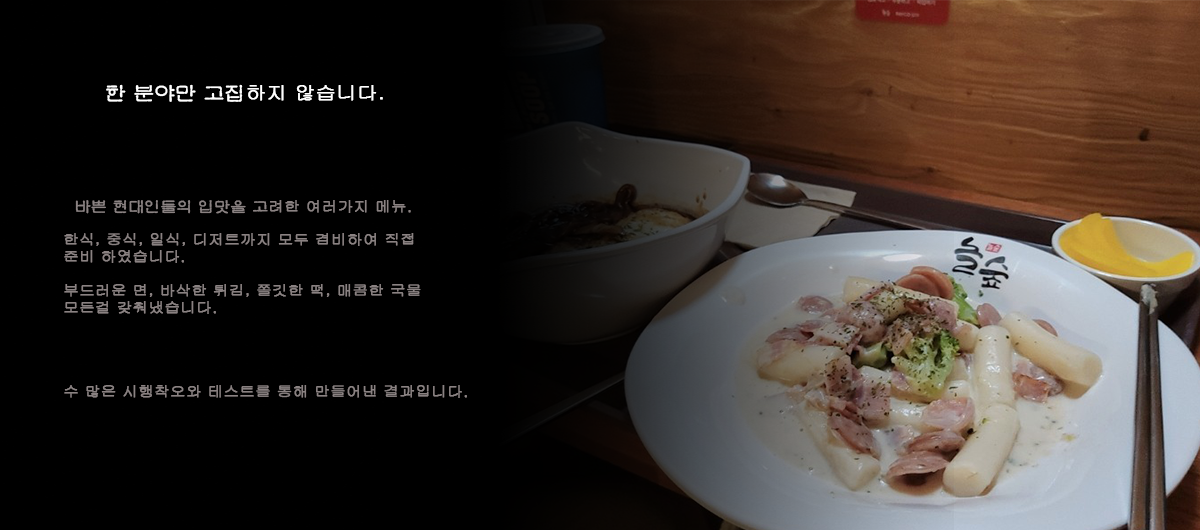
<style>
.page{position:relative;width:1200px;height:530px;background:#000000}
.page>*{position:absolute;margin:0}
.t1{font:18.3px "YJ-INJANG-Medium";color:#ffffff;font-weight:bold;scale:1.11 1}
.t2{font:18.3px "Gulim";color:#ffffff;font-weight:bold;scale:1.11 1}
.t3{font:14px "Gulim";color:#8a8282;font-weight:bold;scale:1.11 1}
.t4{font:14px "YJ-INJANG-Medium";color:#8a8282;font-weight:bold;scale:1.11 1}
</style>
<div class="page">
<p class="t1" style="left:106px;top:84px;width:277px;height:18px">한 분야만 고집<span class="t2">하지 않습니다.</span></p>
<p class="t3" style="left:64px;top:200px;width:403px;height:198px"><span class="t4">  바쁜 현대인들의 입맛을 고</span>려한 여러가지 메뉴.<br><br>한식, 중식, 일식, 디저트까지 모두 겸비하여 직접<br>준비 하였습니다. <br><br>부드러운 면, 바삭한 튀김, 쫄깃한 떡, 매콤한 국물<br>모든걸 갖춰냈습니다.<br><br><br><br><br>수 많은 시행착오와 테스트를 통해 만들어낸 결과입니다.</p>
</div>
